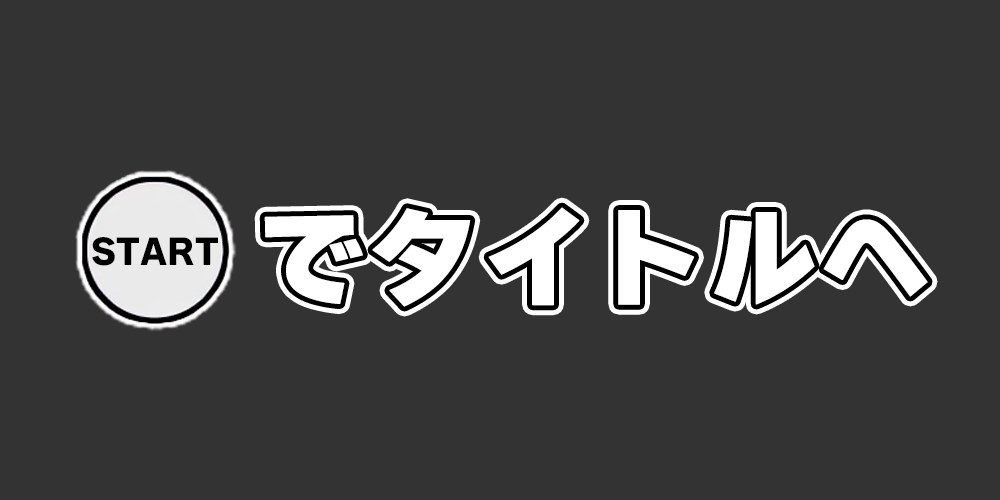
<style>
.page{position:relative;width:1000px;height:500px;background:#333333}
.page>*{position:absolute;margin:0}
.t1{font:110px "WanpakuRuika-08";color:#ffffff;font-weight:bold}
.t2{font:33.6px "WanpakuRuika-08";color:#000000}
</style>
<div class="page">
<p class="t1" style="left:264px;top:207px;width:664px;height:100px">でタイトルへ</p>
<p class="t2" style="left:92px;top:237px;width:126px;height:29px">START</p>
</div>
